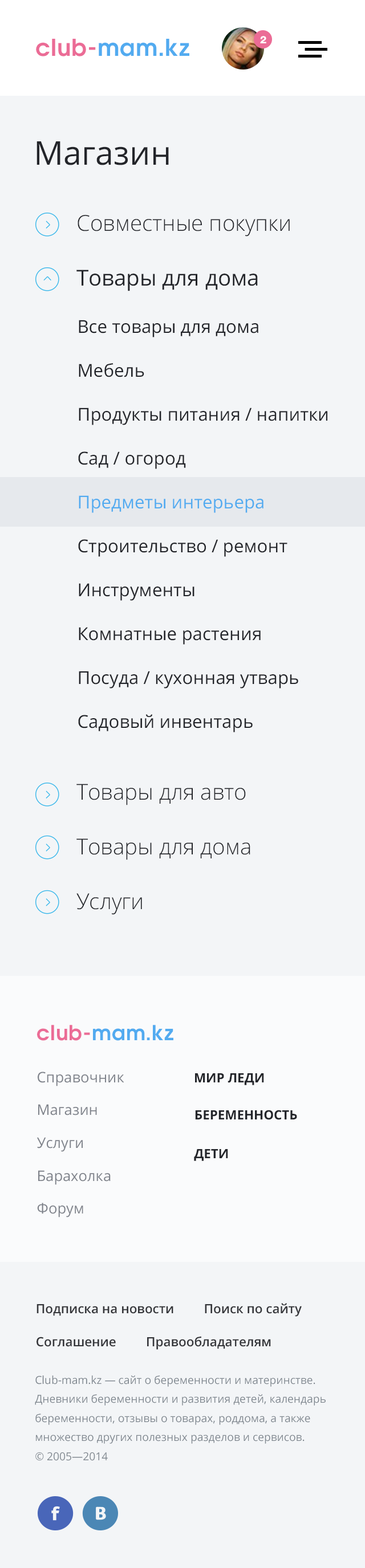
<style>
.page{position:relative;width:365px;height:1568px;background:#f3f5f7}
.page>*{position:absolute;margin:0}
.t1{font:23.1px "AvantGardeGothicC-Demi";letter-spacing:0.025em;color:#52abf0}
.t2{font:23.1px "AvantGardeGothicC-Demi";letter-spacing:0.025em;color:#eb6c96}
.t3{font:10.3px "Helvetica-8-Heavy";letter-spacing:0.025em;color:#ffffff;text-transform:uppercase}
.t4{font:32.8px "OpenSans";color:#23252a}
.t5{font:21.9px/54.7px "OpenSans-Light";color:#23252a}
.t6{font:21.9px/54.7px "OpenSans";color:#23252a}
.t7{font:17.9px/43.9px "OpenSans";color:#23252a}
.t8{font:17.9px/43.9px "OpenSans";color:#52abf0}
.t9{font:20.5px "AvantGardeGothicC-Demi";letter-spacing:0.025em;color:#52abf0}
.t10{font:20.5px "AvantGardeGothicC-Demi";letter-spacing:0.025em;color:#eb6c96}
.t11{font:14.6px/32.8px "OpenSans";color:#7e828a}
.t12{font:12.8px "OpenSans-Bold";color:#23252a;text-transform:uppercase}
.t13{font:12.8px/32.8px "OpenSans-Semibold";color:#36373b}
.t14{font:10.9px/19.2px "OpenSans";color:#7f878f}
</style>
<div class="page">
<p class="t1" style="left:36px;top:39px;width:153px;height:17px"><span class="t2">club-</span>mam.kz</p>
<p class="t3" style="left:260px;top:36px;width:6px;height:7px">2</p>
<p class="t4" style="left:36px;top:141px;width:133px;height:24px">Магазин</p>
<p class="t5" style="left:76px;top:215px;width:214px;height:700px">Совместные покупки<br><span class="t6">Товары для дома<br><br><br><br><br><br><br><br><br><br></span>Товары для авто<br>Товары для дома<br>Услуги</p>
<p class="t7" style="left:78px;top:320px;width:249px;height:412px">Все товары для дома<br>    Мебель<br>    Продукты питания / напитки<br>    Сад / огород<br>    <span class="t8">Предметы интерьера<br></span>    Строительство / ремонт<br>    Инструменты<br>    Комнатные растения<br>    Посуда / кухонная утварь<br>    Садовый инвентарь</p>
<p class="t9" style="left:37px;top:1025px;width:136px;height:16px"><span class="t10">club-</span>mam.kz</p>
<p class="t11" style="left:37px;top:1072px;width:87px;height:145px">Справочник            <br>Магазин           <br>Услуги           <br>Барахолка           <br>Форум</p>
<p class="t12" style="left:195px;top:1073px;width:69px;height:12px">Мир леди</p>
<p class="t12" style="left:195px;top:1110px;width:102px;height:10px">Беременность</p>
<p class="t12" style="left:194px;top:1149px;width:34px;height:12px">Дети</p>
<p class="t13" style="left:36px;top:1303px;width:266px;height:47px">Подписка на новости         Поиск по сайту         <br>Соглашение         Правообладателям</p>
<p class="t14" style="left:35px;top:1375px;width:290px;height:86px">Club-mam.kz — сайт о беременности и материнстве. Дневники беременности и развития детей, календарь беременности, отзывы о товарах, роддома, а также множество других полезных разделов и сервисов.<br>© 2005—2014</p>
</div>
